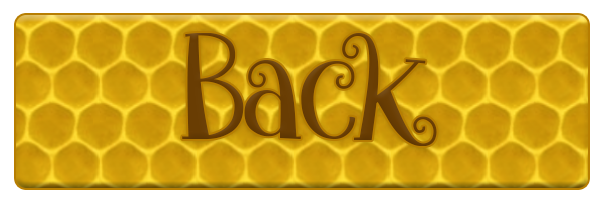
<style>
.page{position:relative;width:600px;height:200px}
.page>*{position:absolute;margin:0}
.t1{font:146.5px "give_me_some_sugar";color:#693d03}
</style>
<div class="page">
<p class="t1" style="left:182px;top:33px;width:255px;height:113px">Back</p>
</div>
